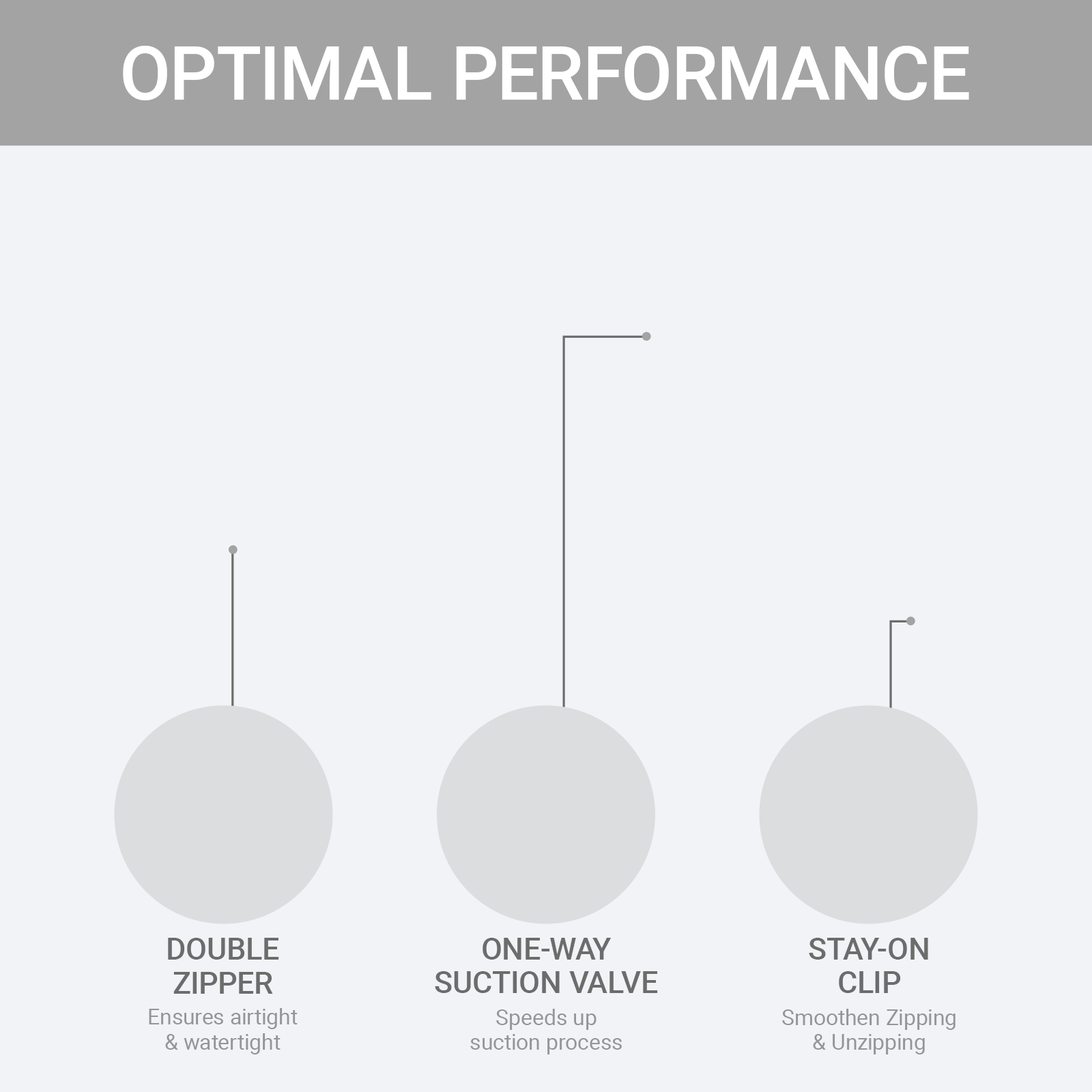
<style>
.page{position:relative;width:1092px;height:1092px;background:#f2f3f6}
.page>*{position:absolute;margin:0}
.t1{font:74.3px "Roboto-Medium";color:#ffffff}
.t2{font:30.6px/33.5px "Roboto-Medium";color:#6c6c6c}
.t3{font:21.8px/24.8px "Roboto-Regular";color:#949596}
</style>
<div class="page">
<p class="t1" style="left:123px;top:46px;width:846px;height:54px">OPTIMAL PERFORMANCE</p>
<p class="t2" style="left:168px;top:938px;width:111px;height:56px;text-align:center">DOUBLE<br>ZIPPER</p>
<p class="t2" style="left:435px;top:938px;width:223px;height:55px;text-align:center">ONE-WAY<br>SUCTION VALVE</p>
<p class="t2" style="left:809px;top:938px;width:119px;height:55px;text-align:center">STAY-ON<br>CLIP</p>
<p class="t3" style="left:149px;top:1008px;width:149px;height:46px;text-align:center">Ensures airtight<br>&amp; watertight</p>
<p class="t3" style="left:470px;top:1009px;width:152px;height:45px;text-align:center">Speeds up<br>suction process</p>
<p class="t3" style="left:782px;top:1009px;width:173px;height:45px;text-align:center">Smoothen Zipping<br>&amp; Unzipping</p>
</div>
